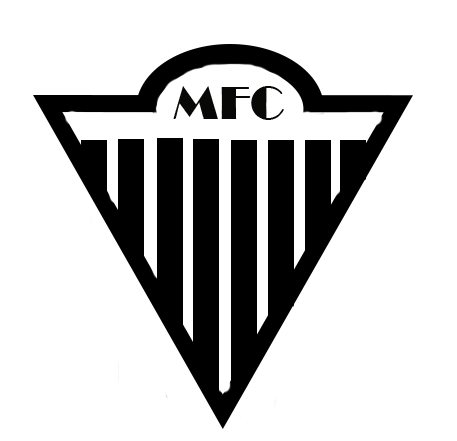
<style>
.page{position:relative;width:457px;height:441px;background:#ffffff}
.page>*{position:absolute;margin:0}
.t1{font:48px "Broadway";color:#080807}
</style>
<div class="page">
<p class="t1" style="left:173px;top:86px;width:111px;height:34px">MFC</p>
</div>
